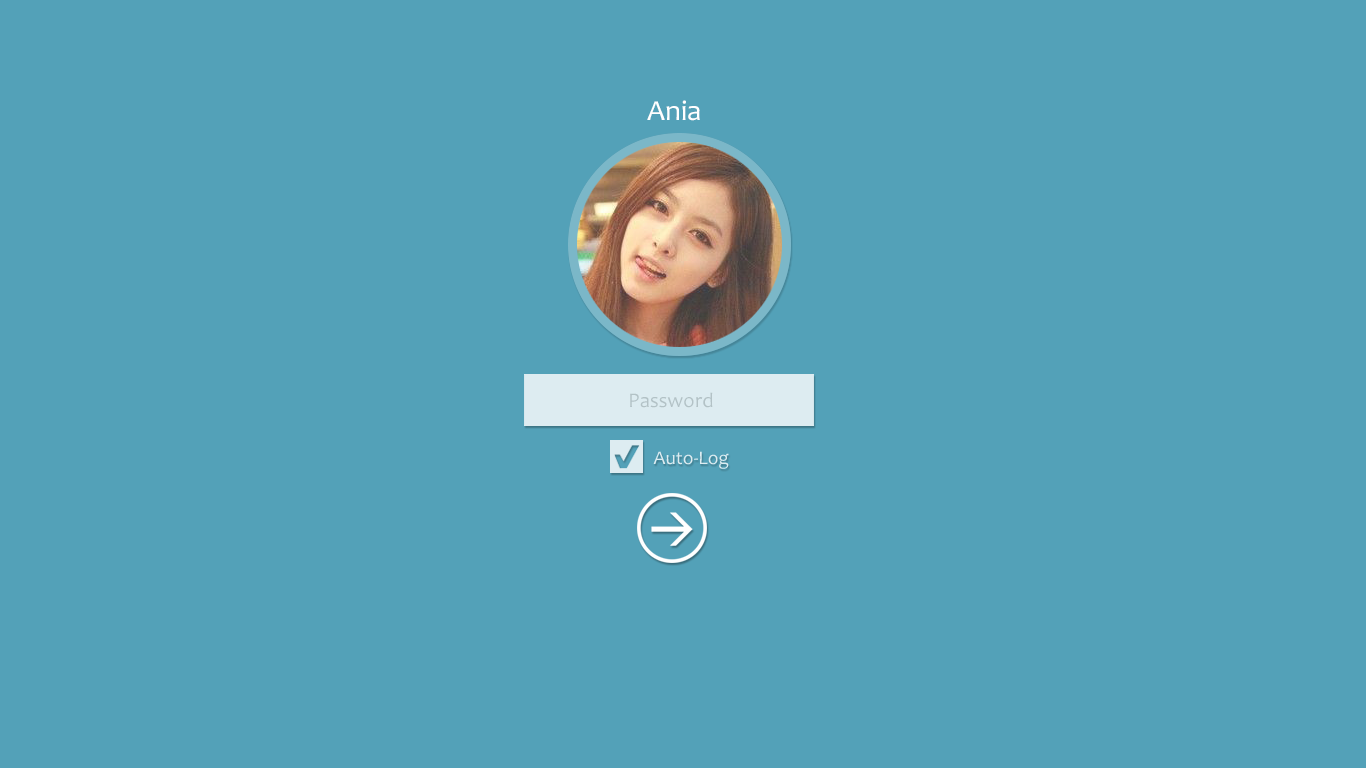
<style>
.page{position:relative;width:1366px;height:768px;background:#53a1b8}
.page>*{position:absolute;margin:0}
.t1{font:29.2px "Candara";color:#ffffff}
.t2{font:20.8px "Candara";color:#b3c2c6}
.t3{font:19.3px "Candara";color:#ddecf1}
</style>
<div class="page">
<p class="t1" style="left:647px;top:100px;width:53px;height:21px">Ania</p>
<p class="t2" style="left:630px;top:392px;width:83px;height:16px">Password</p>
<p class="t3" style="left:653px;top:451px;width:76px;height:18px">Auto-Log</p>
</div>
